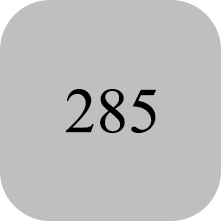
<style>
.page{position:relative;width:221px;height:221px;background:#bfbfbf}
.page>*{position:absolute;margin:0}
.t1{font:63.9px "TimesNewRomanPSMT";color:#000000}
</style>
<div class="page">
<p class="t1" style="left:65px;top:89px;width:92px;height:44px">285</p>
</div>
